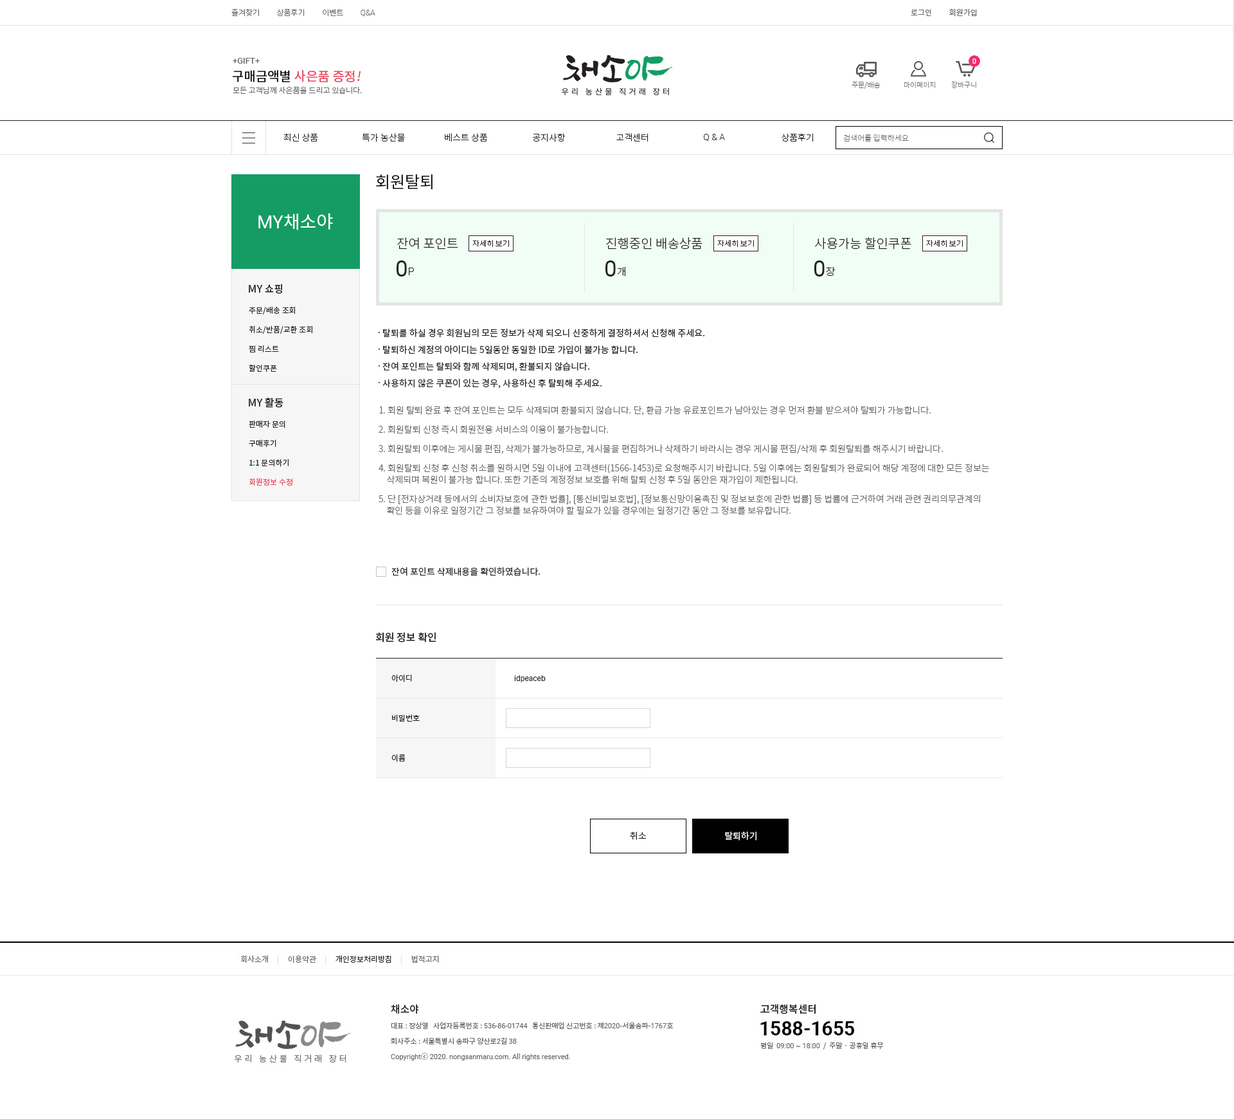
<style>
.page{position:relative;width:1234px;height:1119px;background:#ffffff}
.page>*{position:absolute;margin:0}
.t1{font:7.7px "NotoSansCJKkr-Light";color:#666666}
.t2{font:7.7px "Roboto-Light";color:#666666}
.t3{font:7.7px "NotoSansCJKkr-DemiLight";color:#666666}
.t4{font:8.4px "Roboto-Medium";color:#666666}
.t5{font:12.9px "NotoSansCJKkr-Medium";color:#ea475c}
.t6{font:12.9px "NotoSansCJKkr-Medium";color:#000000}
.t7{font:12.9px "NotoSansCJKkr-Medium";color:#ea475c;font-style:italic}
.t8{font:7.1px "NotoSansCJKkr-Thin";color:#666666}
.t9{font:9px "NotoSansCJKkr-Light";color:#222222}
.t10{font:9px "Roboto-Light";color:#222222}
.t11{font:7.7px "NotoSansCJKkr-Thin";color:#666666}
.t12{font:16.1px "NotoSansCJKkr-Regular";color:#000000}
.t13{font:18px "NotoSansCJKkr-Regular";color:#ffffff}
.t14{font:18px "Roboto-Regular";color:#ffffff}
.t15{font:12.9px "NotoSansCJKkr-Light";color:#222222}
.t16{font:7.7px "NotoSansCJKkr-Light";color:#222222}
.t17{font:22.5px "Roboto-Regular";color:#222222}
.t18{font:10.3px "Roboto-Light";color:#222222}
.t19{font:10.3px "NotoSansCJKkr-Light";color:#222222}
.t20{font:10.3px "NotoSansCJKkr-Medium";color:#222222}
.t21{font:7.7px/19.3px "NotoSansCJKkr-Regular";color:#222222}
.t22{font:9px/16.7px "NotoSansCJKkr-Regular";color:#222222}
.t23{font:9px/19.3px "NotoSansCJKkr-Light";color:#666666}
.t24{font:9px/11.6px "NotoSansCJKkr-Light";color:#666666}
.t25{font:7.7px/19.3px "NotoSansCJKkr-Regular";color:#ea475c}
.t26{font:9px "NotoSansCJKkr-Regular";color:#222222}
.t27{font:7.7px "NotoSansCJKkr-Regular";color:#222222}
.t28{font:7.7px "Roboto-Regular";color:#222222}
.t29{font:9px "NotoSansCJKkr-DemiLight";color:#222222}
.t30{font:9px "NotoSansCJKkr-DemiLight";color:#ffffff}
</style>
<div class="page">
<p class="t1" style="left:231px;top:8px;width:144px;height:9px">즐겨찾기          상품후기          이벤트          <span class="t2">Q&amp;A</span></p>
<p class="t3" style="left:911px;top:8px;width:66px;height:9px">로그인          회원가입</p>
<p class="t4" style="left:233px;top:58px;width:27px;height:6px">+GIFT+</p>
<p class="t5" style="left:233px;top:70px;width:128px;height:12px"><span class="t6">구매금액별 </span>사은품 증정<span class="t7">!</span></p>
<p class="t1" style="left:233px;top:86px;width:129px;height:8px">모든 고객님께 사은품을 드리고 있습니다.</p>
<p class="t8" style="left:852px;top:81px;width:29px;height:8px">주문/배송</p>
<p class="t8" style="left:904px;top:82px;width:32px;height:7px">마이페이지</p>
<p class="t8" style="left:951px;top:81px;width:26px;height:8px">장바구니</p>
<p class="t9" style="left:284px;top:133px;width:34px;height:8px">최신 상품</p>
<p class="t9" style="left:362px;top:133px;width:43px;height:9px">특가 농산물</p>
<p class="t9" style="left:445px;top:133px;width:43px;height:9px">베스트 상품</p>
<p class="t9" style="left:533px;top:133px;width:33px;height:9px">공지사항</p>
<p class="t9" style="left:617px;top:133px;width:32px;height:9px">고객센터</p>
<p class="t10" style="left:704px;top:134px;width:21px;height:7px">Q &amp; A</p>
<p class="t9" style="left:782px;top:133px;width:32px;height:9px">상품후기</p>
<p class="t11" style="left:843px;top:134px;width:66px;height:8px">검색어를 입력하세요</p>
<p class="t12" style="left:376px;top:174px;width:57px;height:16px">회원탈퇴</p>
<p class="t13" style="left:258px;top:213px;width:75px;height:17px"><span class="t14">MY</span>채소야</p>
<p class="t15" style="left:397px;top:237px;width:61px;height:12px">잔여 포인트</p>
<p class="t16" style="left:473px;top:240px;width:36px;height:8px">자세히 보기</p>
<p class="t15" style="left:606px;top:237px;width:97px;height:12px">진행중인 배송상품</p>
<p class="t16" style="left:717px;top:240px;width:37px;height:8px">자세히 보기</p>
<p class="t15" style="left:815px;top:237px;width:97px;height:12px">사용가능 할인쿠폰</p>
<p class="t16" style="left:926px;top:240px;width:37px;height:8px">자세히 보기</p>
<p class="t17" style="left:397px;top:260px;width:17px;height:16px">0<span class="t18">P</span></p>
<p class="t17" style="left:606px;top:260px;width:20px;height:16px">0<span class="t19">개</span></p>
<p class="t17" style="left:815px;top:260px;width:21px;height:16px">0<span class="t19">장</span></p>
<p class="t20" style="left:249px;top:284px;width:33px;height:10px">MY 쇼핑</p>
<p class="t21" style="left:249px;top:306px;width:63px;height:66px">주문/배송 조회<br>취소/반품/교환 조회<br>찜 리스트<br>할인쿠폰</p>
<p class="t22" style="left:378px;top:329px;width:327px;height:59px">. 탈퇴를 하실 경우 회원님의 모든 정보가 삭제 되오니 신중하게 결정하셔서 신청해 주세요.<br>. 탈퇴하신 계정의 아이디는 5일동안 동일한 ID로 가입이 불가능 합니다.<br>. 잔여 포인트는 탈퇴와 함께 삭제되며, 환불되지 않습니다.<br>. 사용하지 않은 쿠폰이 있는 경우, 사용하신 후 탈퇴해 주세요.</p>
<p class="t20" style="left:249px;top:397px;width:35px;height:11px">MY 활동</p>
<p class="t23" style="left:379px;top:406px;width:610px;height:109px">1. 회원 탈퇴 완료 후 잔여 포인트는 모두 삭제되며 환불되지 않습니다. 단, 환급 가능 유료포인트가 남아있는 경우 먼저 환불 받으셔야 탈퇴가 가능합니다.<br>2. 회원탈퇴 신청 즉시 회원전용 서비스의 이용이 불가능합니다.<br>3. 회원탈퇴 이후에는 게시물 편집, 삭제가 불가능하므로, 게시물을 편집하거나 삭제하기 바라시는 경우 게시물 편집/삭제 후 회원탈퇴를 해주시기 바랍니다.<br>4. 회원탈퇴 신청 후 신청 취소를 원하시면 5일 이내에 고객센터(1566-1453)로 요청해주시기 바랍니다. 5일 이후에는 회원탈퇴가 완료되어 해당 계정에 대한 모든 정보는 <br><span class="t24">    삭제되며 복원이 불가능 합니다. 또한 기존의 계정정보 보호를 위해 탈퇴 신청 후 5일 동안은 재가입이 제한됩니다.<br></span>5. 단 [전자상거래 등에서의 소비자보호에 관한 법률], [통신비밀보호법], [정보통신망이용촉진 및 정보보호에 관한 법률] 등 법률에 근거하여 거래 관련 권리의무관계의 <br><span class="t24">    확인 등을 이유로 일정기간 그 정보를 보유하여야 할 필요가 있을 경우에는 일정기간 동안 그 정보를 보유합니다.</span></p>
<p class="t21" style="left:249px;top:420px;width:44px;height:65px">판매자 문의<br>구매후기<br>1:1 문의하기<br><span class="t25">회원정보 수정</span></p>
<p class="t26" style="left:392px;top:567px;width:149px;height:9px">잔여 포인트 삭제내용을 확인하였습니다.</p>
<p class="t20" style="left:375px;top:632px;width:62px;height:10px">회원 정보 확인</p>
<p class="t27" style="left:392px;top:674px;width:20px;height:8px">아이디</p>
<p class="t28" style="left:514px;top:675px;width:32px;height:7px">idpeaceb</p>
<p class="t27" style="left:392px;top:714px;width:28px;height:7px">비밀번호</p>
<p class="t27" style="left:392px;top:754px;width:14px;height:8px">이름</p>
<p class="t29" style="left:630px;top:831px;width:17px;height:9px">취소</p>
<p class="t30" style="left:725px;top:831px;width:32px;height:9px">탈퇴하기</p>
</div>
